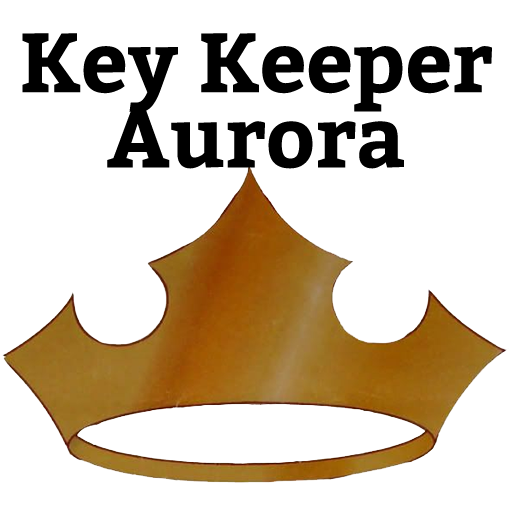
<style>
.page{position:relative;width:512px;height:512px;background:#ffffff}
.page>*{position:absolute;margin:0}
.t1{font:83.6px/75.2px "Bitter-Bold";color:#000000}
</style>
<div class="page">
<p class="t1" style="left:22px;top:33px;width:470px;height:136px;text-align:center">Key Keeper<br>Aurora</p>
</div>
